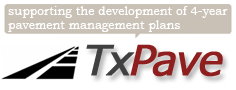
<style>
.page{position:relative;width:236px;height:90px;background:#ffffff}
.page>*{position:absolute;margin:0}
.t1{font:12px "BookmanOldStyle";color:#ffffff}
</style>
<div class="page">
<p class="t1" style="left:8px;top:6px;width:220px;height:26px">supporting the development of 4-year<br>pavement management plans</p>
</div>
